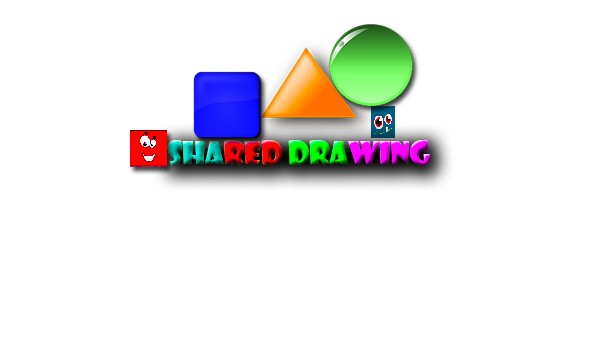
<style>
.page{position:relative;width:600px;height:350px;background:#ffffff}
.page>*{position:absolute;margin:0}
.t1{font:30px "ShowcardGothic-Reg"}
.t2{font:30px "Tahoma"}
</style>
<div class="page">
<p class="t1" style="left:167px;top:140px;width:263px;height:25px"><span class="t2">                  </span>Shared drawing</p>
</div>
